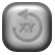
<style>
.page{position:relative;width:55px;height:55px;background:#ffffff}
.page>*{position:absolute;margin:0}
.t1{font:12px "ArialMT";color:#8e8e8e}
</style>
<div class="page">
<p class="t1" style="left:20px;top:24px;width:16px;height:9px">XY</p>
</div>
